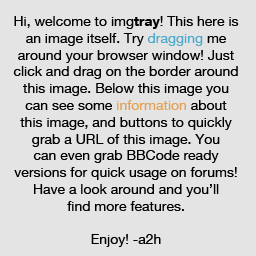
<style>
.page{position:relative;width:256px;height:256px;background:#e4e4e4}
.page>*{position:absolute;margin:0}
.t1{font:14px "HelveticaNeue";color:#000000}
.t2{font:14px "HelveticaNeue-Bold";color:#000000}
.t3{font:14px "HelveticaNeue";color:#4ea9ca}
.t4{font:14px "HelveticaNeue";color:#e2a154}
</style>
<div class="page">
<p class="t1" style="left:13px;top:16px;width:226px;height:231px;text-align:center">Hi, welcome to img<span class="t2">tray</span>! This here is<br>an image itself. Try <span class="t3">dragging</span> me<br>around your browser window! Just<br>click and drag on the border around<br>this image. Below this image you<br>can see some <span class="t4">information</span> about<br>this image, and buttons to quickly<br>grab a URL of this image. You<br>can even grab BBCode ready<br>versions for quick usage on forums!<br>Have a look around and you’ll<br>find more features.<br><br>Enjoy! -a2h</p>
</div>
